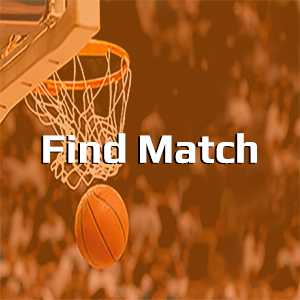
<style>
.page{position:relative;width:300px;height:300px}
.page>*{position:absolute;margin:0}
.t1{font:41.7px "Play-Bold";color:#ffffff}
</style>
<div class="page">
<p class="t1" style="left:43px;top:133px;width:214px;height:31px">Find Match</p>
</div>
